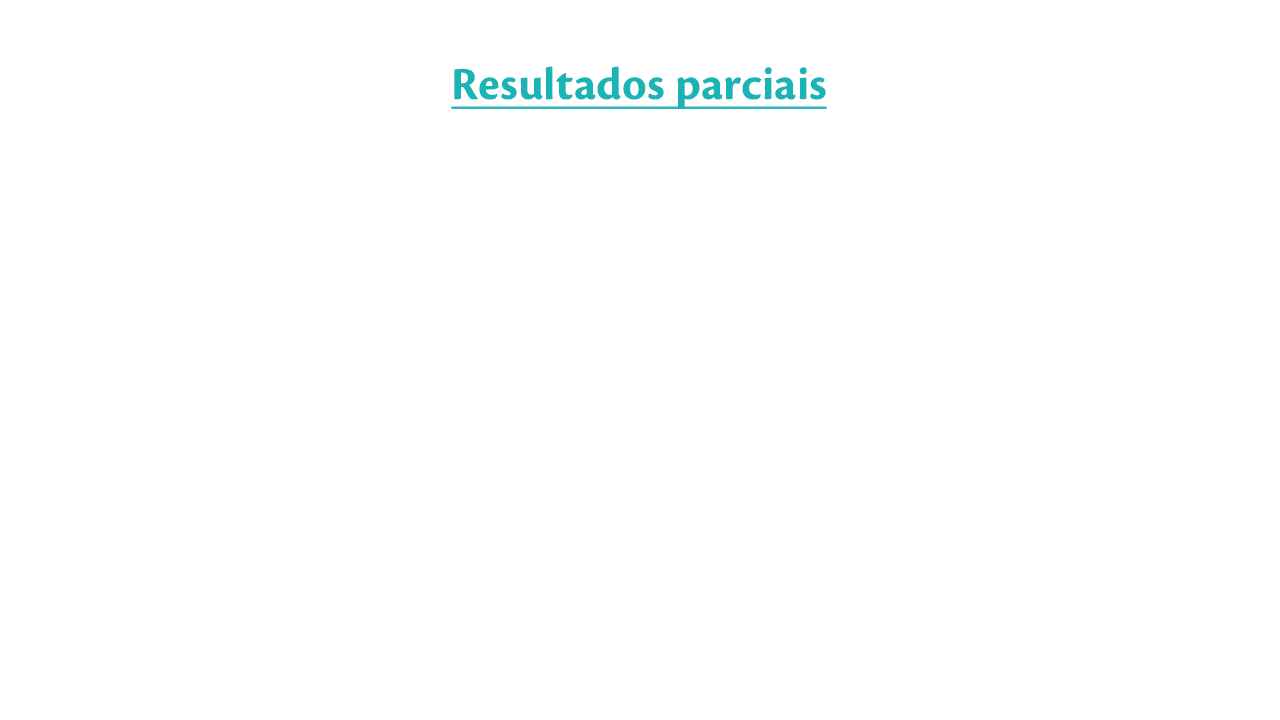
<style>
.page{position:relative;width:1280px;height:720px;background:#ffffff}
.page>*{position:absolute;margin:0}
.t1{font:47.8px "CronosPro-Bold";color:#1ab4b4;text-decoration:underline}
</style>
<div class="page">
<p class="t1" style="left:451px;top:66px;width:376px;height:43px">Resultados parciais</p>
</div>
